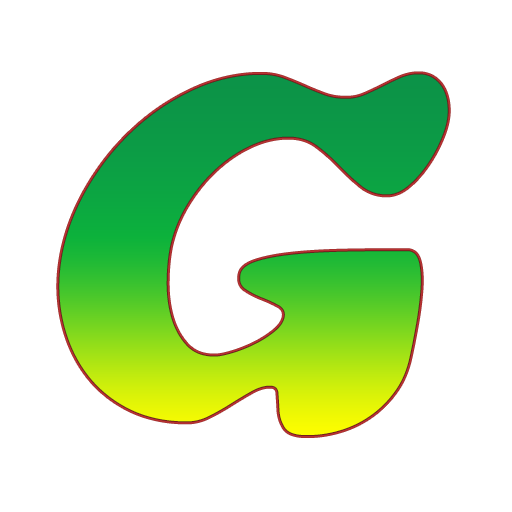
<style>
.page{position:relative;width:512px;height:512px;background:#ffffff}
.page>*{position:absolute;margin:0}
.t1{font:512px "J.Airplane-swash-Italic"}
</style>
<div class="page">
<p class="t1" style="left:59px;top:74px;width:389px;height:361px">G</p>
</div>
